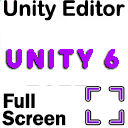
<style>
.page{position:relative;width:128px;height:128px;background:#ffffff}
.page>*{position:absolute;margin:0}
.t1{font:21.3px "ArialRoundedMTBold";color:#000000}
.t2{font:26.7px "FONTSPRINGDEMO-OktahRoundBlackRegular";letter-spacing:0.08em;color:#ae00ff}
</style>
<div class="page">
<p class="t1" style="left:4px;top:0px;width:121px;height:21px">Unity Editor</p>
<p class="t2" style="left:7px;top:49px;width:112px;height:19px">UNITY 6</p>
</div>
